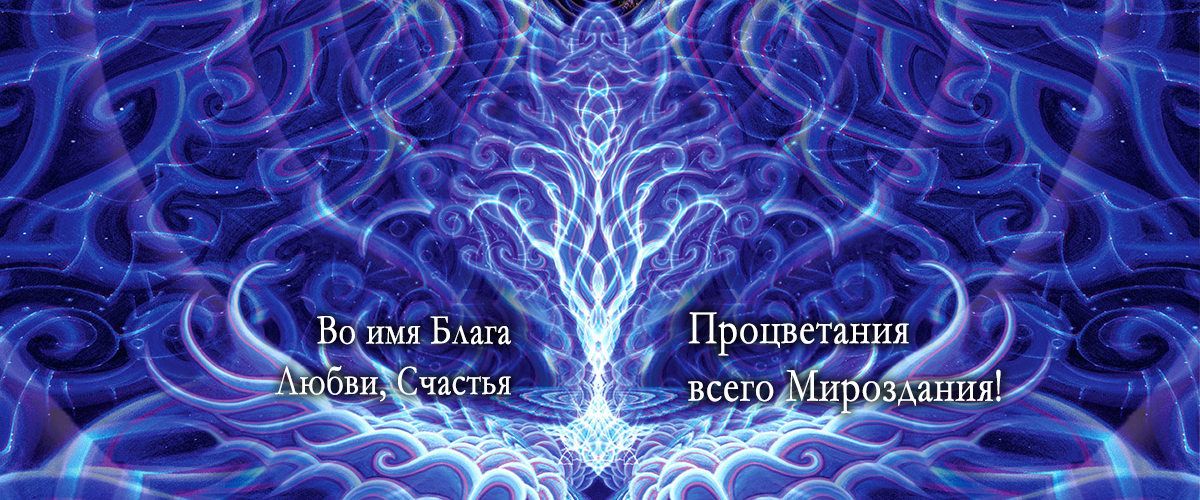
<style>
.page{position:relative;width:1200px;height:500px}
.page>*{position:absolute;margin:0}
.t1{font:42.2px "Garamond";color:#ffffff;font-weight:bold;scale:0.8 1}
.t2{font:48px "Garamond";color:#ffffff;font-weight:bold;scale:0.8 1}
</style>
<div class="page">
<p class="t1" style="left:275px;top:316px;width:236px;height:86px;text-align:right">Во имя Блага<br>Любви, Счастья</p>
<p class="t2" style="left:688px;top:312px;width:313px;height:102px">Процветания<br>всего Мироздания!</p>
</div>
